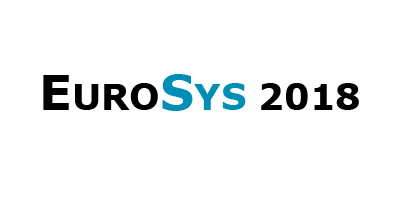
<style>
.page{position:relative;width:400px;height:200px;background:#ffffff}
.page>*{position:absolute;margin:0}
.t1{font:36px "Verdana-Bold";color:#000000;text-transform:uppercase}
.t2{font:48px "Verdana-Bold";color:#000000;text-transform:uppercase}
.t3{font:48px "Verdana-Bold";color:#008eb6;text-transform:uppercase}
.t4{font:36px "Verdana-Bold";color:#008eb6;text-transform:uppercase}
</style>
<div class="page">
<p class="t1" style="left:43px;top:74px;width:316px;height:37px"><span class="t2">E</span>uro<span class="t3">S</span><span class="t4">ys</span> 2018</p>
</div>
